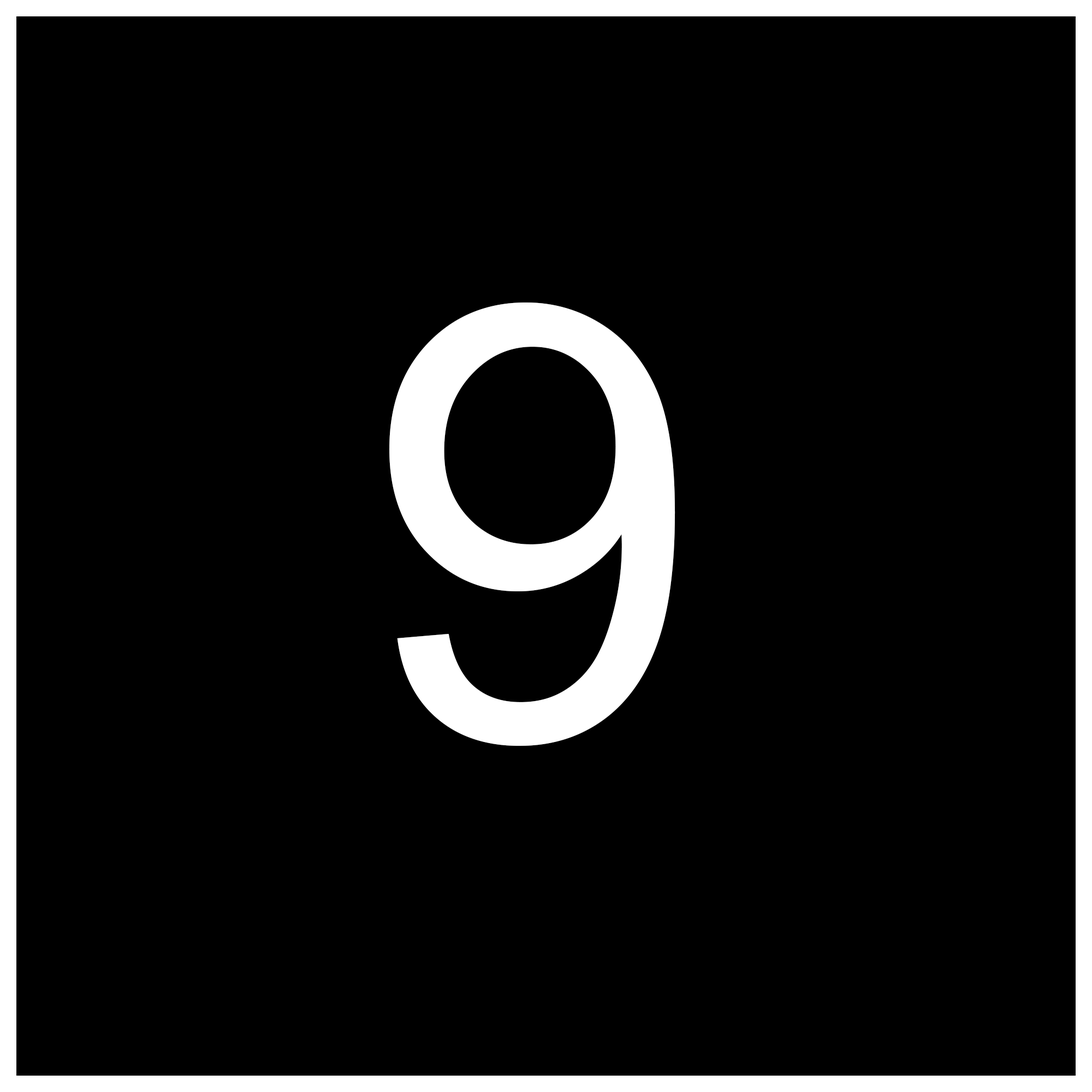
<style>
.page{position:relative;width:1092px;height:1092px;background:#000000}
.page>*{position:absolute;margin:0}
.t1{font:606.7px "ArialMT";color:#ffffff}
</style>
<div class="page">
<p class="t1" style="left:389px;top:302px;width:286px;height:444px">9</p>
</div>
